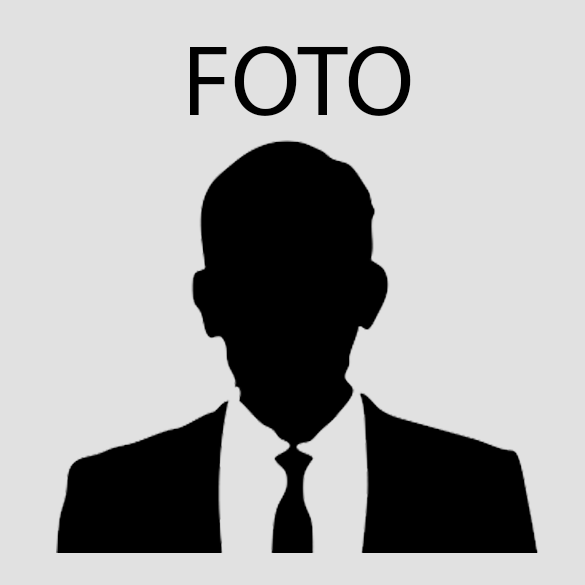
<style>
.page{position:relative;width:585px;height:585px;background:#e1e1e1}
.page>*{position:absolute;margin:0}
.t1{font:100.3px "MyriadPro-Regular";color:#000000}
</style>
<div class="page">
<p class="t1" style="left:190px;top:46px;width:221px;height:70px">FOTO</p>
</div>
